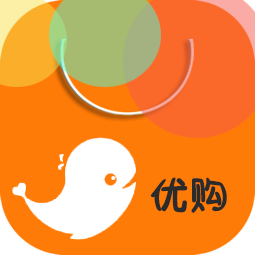
<style>
.page{position:relative;width:255px;height:255px;background:#ff7b08}
.page>*{position:absolute;margin:0}
.t1{font:30px "STYuanti-SC-Bold";letter-spacing:0.075em;color:#2b2b2b}
</style>
<div class="page">
<p class="t1" style="left:150px;top:177px;width:77px;height:36px">优购</p>
</div>
